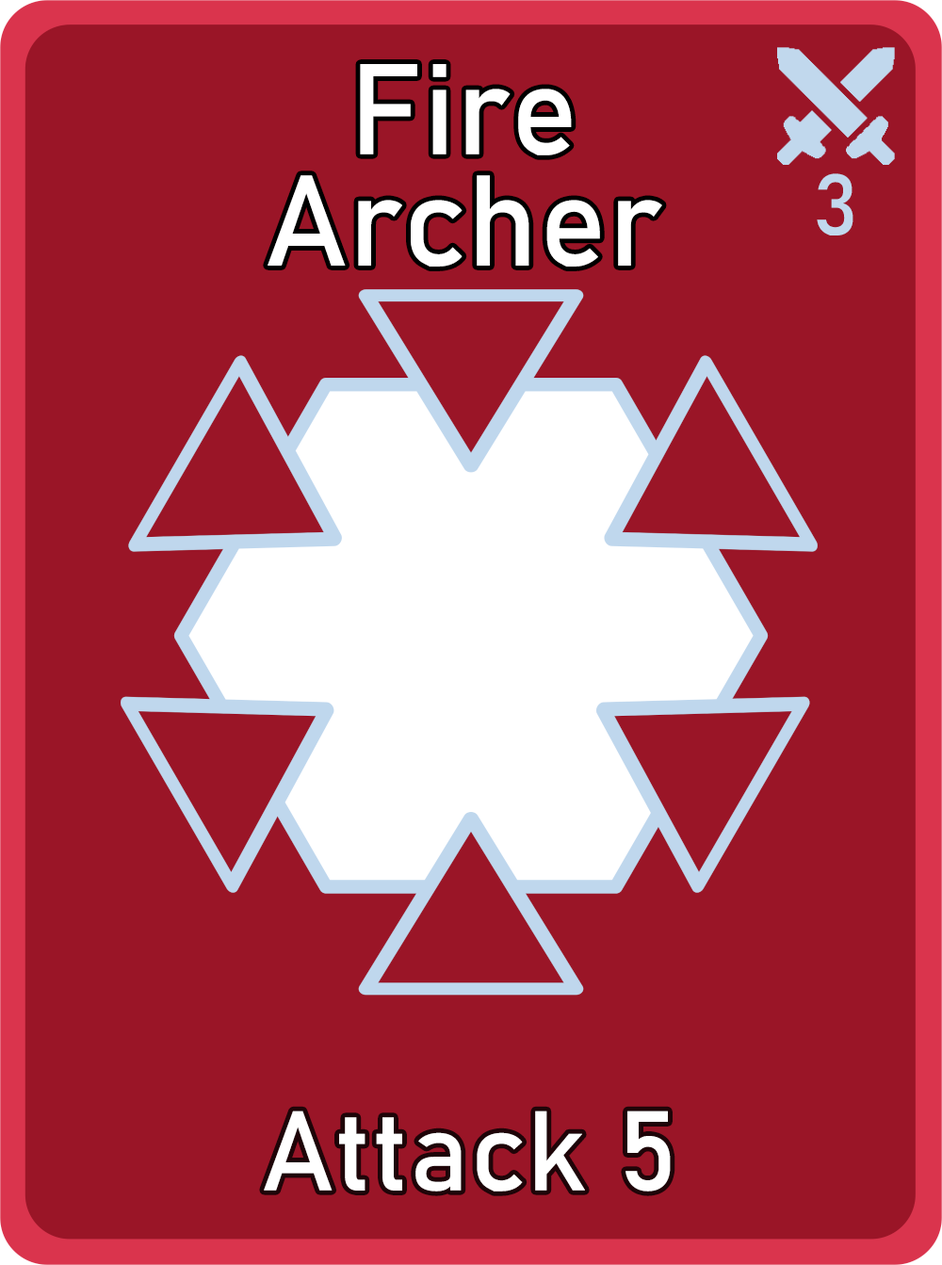
<style>
.page{position:relative;width:942px;height:1265px;background:#9a1527}
.page>*{position:absolute;margin:0}
.t1{font:126.7px/111.3px "Bahnschrift";letter-spacing:0.01em;color:#ffffff}
.t2{font:85px "Bahnschrift";letter-spacing:0.01em;color:#c1d8ed}
.t3{font:111.3px "Bahnschrift";letter-spacing:0.01em;color:#ffffff}
</style>
<div class="page">
<p class="t1" style="left:268px;top:64px;width:394px;height:203px;text-align:center">Fire<br>Archer</p>
<p class="t2" style="left:817px;top:173px;width:37px;height:63px">3</p>
<p class="t3" style="left:264px;top:1111px;width:407px;height:81px">Attack 5</p>
</div>
